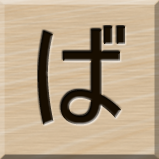
<style>
.page{position:relative;width:159px;height:159px}
.page>*{position:absolute;margin:0}
.t1{font:116px "MS-UIGothic";color:#180e01}
</style>
<div class="page">
<p class="t1" style="left:38px;top:26px;width:87px;height:99px">ば</p>
</div>
